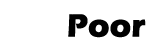
<style>
.page{position:relative;width:150px;height:50px;background:#ffffff}
.page>*{position:absolute;margin:0}
.t1{font:33.3px "ErasITC-Bold";color:#010101}
.t2{font:33.3px "ErasITC-Bold";color:#8d8d8d}
</style>
<div class="page">
<p class="t1" style="left:68px;top:14px;width:78px;height:24px"><span class="t2">  </span>Poor</p>
</div>
